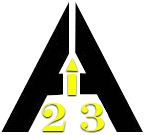
<style>
.page{position:relative;width:145px;height:135px;background:#ffffff}
.page>*{position:absolute;margin:0}
.t1{font:40px "EngraversMT";color:#f7ff03}
</style>
<div class="page">
<p class="t1" style="left:42px;top:103px;width:62px;height:28px">2 3</p>
</div>
